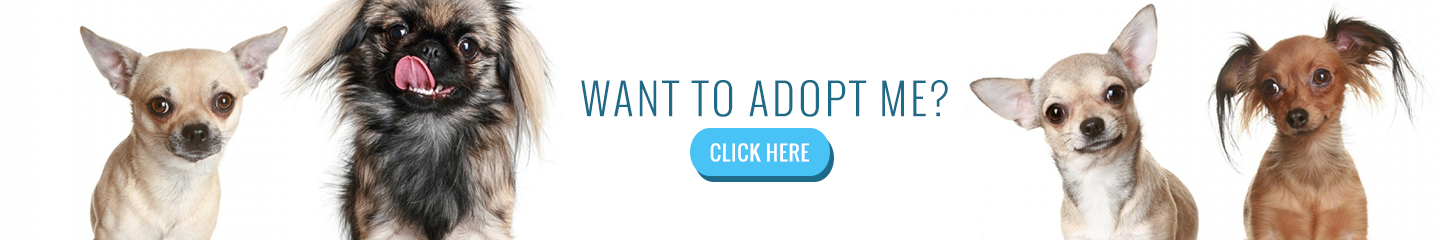
<style>
.page{position:relative;width:1445px;height:240px;background:#ffffff}
.page>*{position:absolute;margin:0}
.t1{font:42.7px "Oswald-Light";letter-spacing:0.08em;color:#1d6b89}
.t2{font:20.7px "Oswald";letter-spacing:0.04em;color:#ffffff}
</style>
<div class="page">
<p class="t1" style="left:581px;top:80px;width:367px;height:37px">WANT TO ADOPT ME?</p>
<p class="t2" style="left:710px;top:143px;width:99px;height:19px">CLICK HERE</p>
</div>
